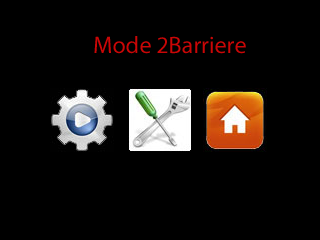
<style>
.page{position:relative;width:320px;height:240px;background:#000000}
.page>*{position:absolute;margin:0}
.t1{font:24px "MyriadPro-Regular";color:#ca0606}
</style>
<div class="page">
<p class="t1" style="left:94px;top:36px;width:152px;height:18px">Mode 2Barriere</p>
</div>
